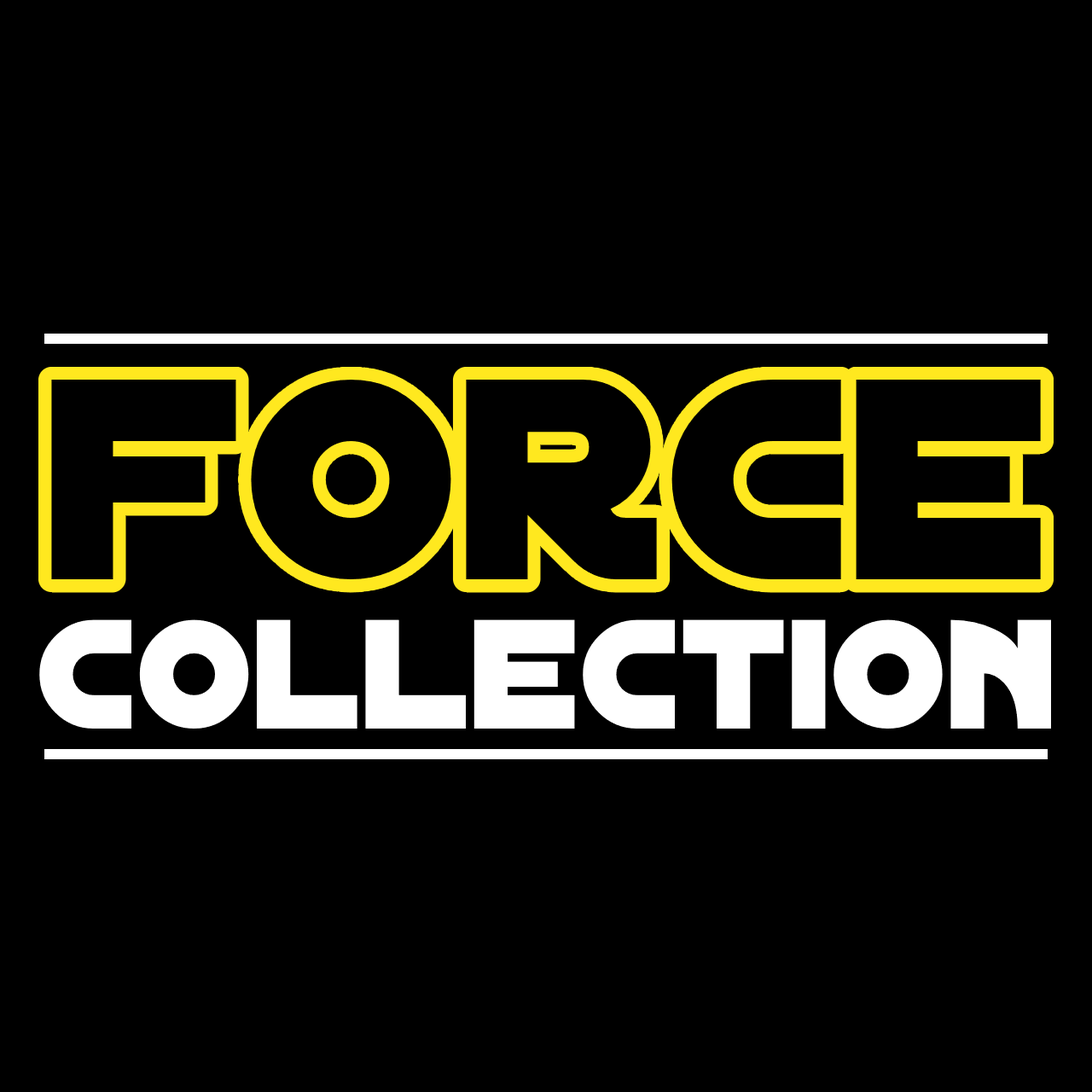
<style>
.page{position:relative;width:1092px;height:1092px;background:#000000}
.page>*{position:absolute;margin:0}
.t1{font:307.1px "DistantGalaxy";color:#000000}
.t2{font:167.2px "DistantGalaxy";color:#ffffff}
.t3{font:103px "DistantGalaxy";color:#000000}
</style>
<div class="page">
<p class="t1" style="left:51px;top:380px;width:990px;height:200px">force</p>
<p class="t2" style="left:39px;top:619px;width:1013px;height:110px"><span class="t3"><br></span>collection</p>
</div>
